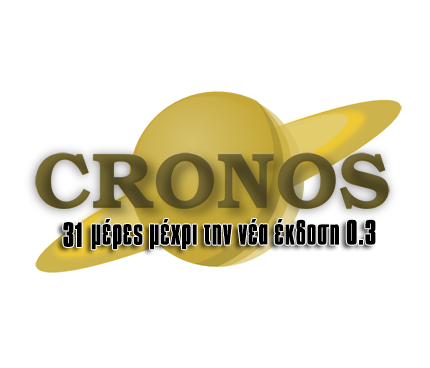
<style>
.page{position:relative;width:430px;height:368px;background:#ffffff}
.page>*{position:absolute;margin:0}
.t1{font:30px "Aka-AcidGR-Compacta";color:#000000;font-weight:bold}
.t2{font:60px "Aka-AcidGR-Compacta";color:#000000;font-weight:bold}
</style>
<div class="page">
<p class="t1" style="left:63px;top:222px;width:19px;height:25px">31</p>
<p class="t1" style="left:91px;top:219px;width:285px;height:31px"><span class="t2"> </span>μέρες μέχρι την νέα έκδοση 0.3</p>
</div>
